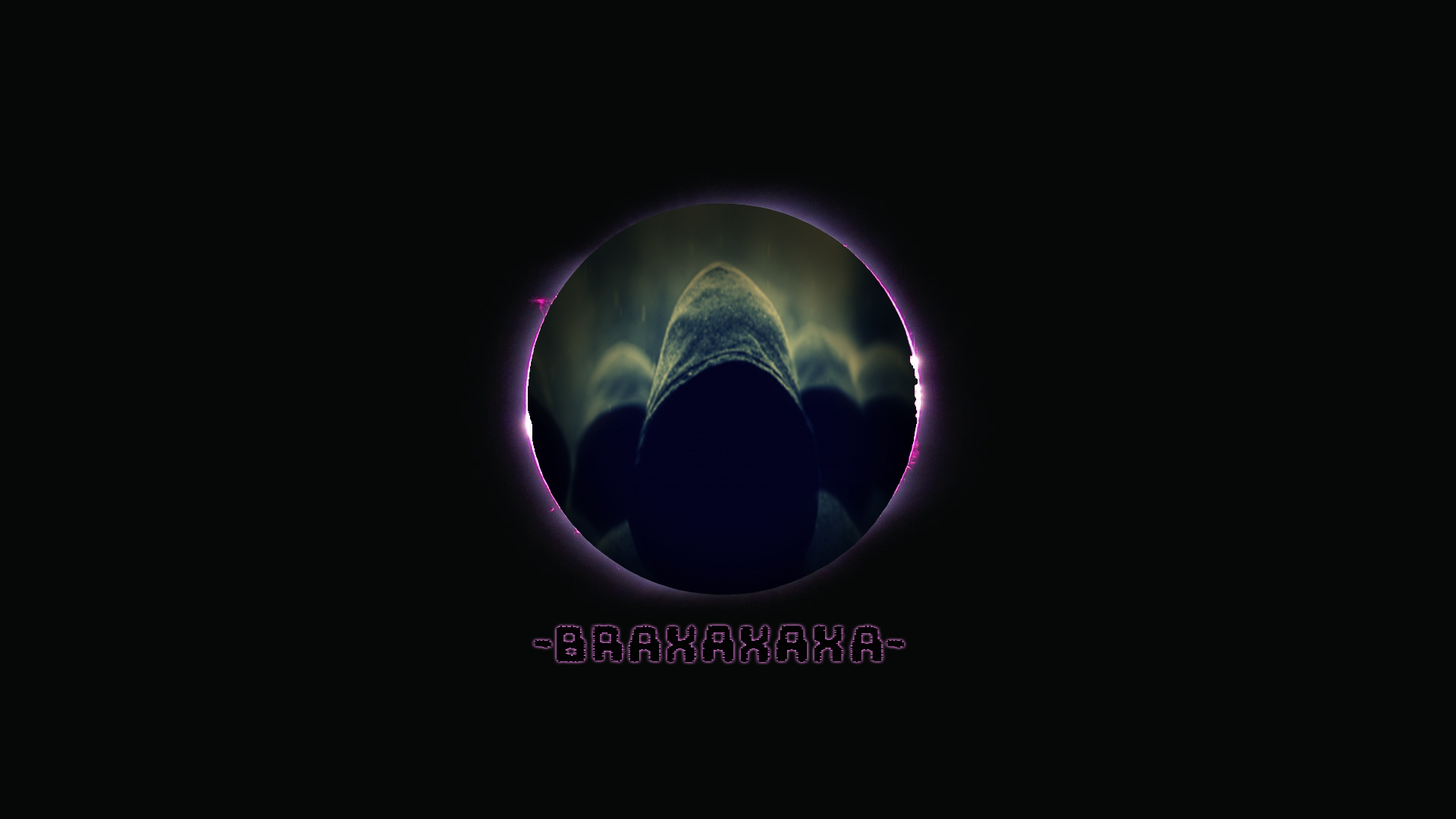
<style>
.page{position:relative;width:1456px;height:819px;background:#060807}
.page>*{position:absolute;margin:0}
.t1{font:45.6px "Multivac-Interference";color:#020202}
</style>
<div class="page">
<p class="t1" style="left:533px;top:626px;width:372px;height:36px">-braXAXAxa-</p>
</div>
